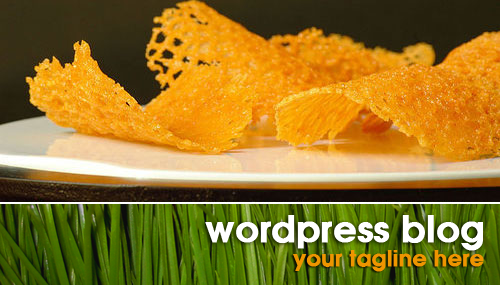
<style>
.page{position:relative;width:500px;height:285px}
.page>*{position:absolute;margin:0}
.t1{font:36px "AvantGarde-Demi";color:#ffffff;font-weight:bold}
.t2{font:22px "AvantGarde-Demi";color:#ee9500;font-weight:bold}
</style>
<div class="page">
<p class="t1" style="left:205px;top:215px;width:278px;height:36px">wordpress blog</p>
<p class="t2" style="left:293px;top:250px;width:191px;height:22px">your tagline here</p>
</div>
